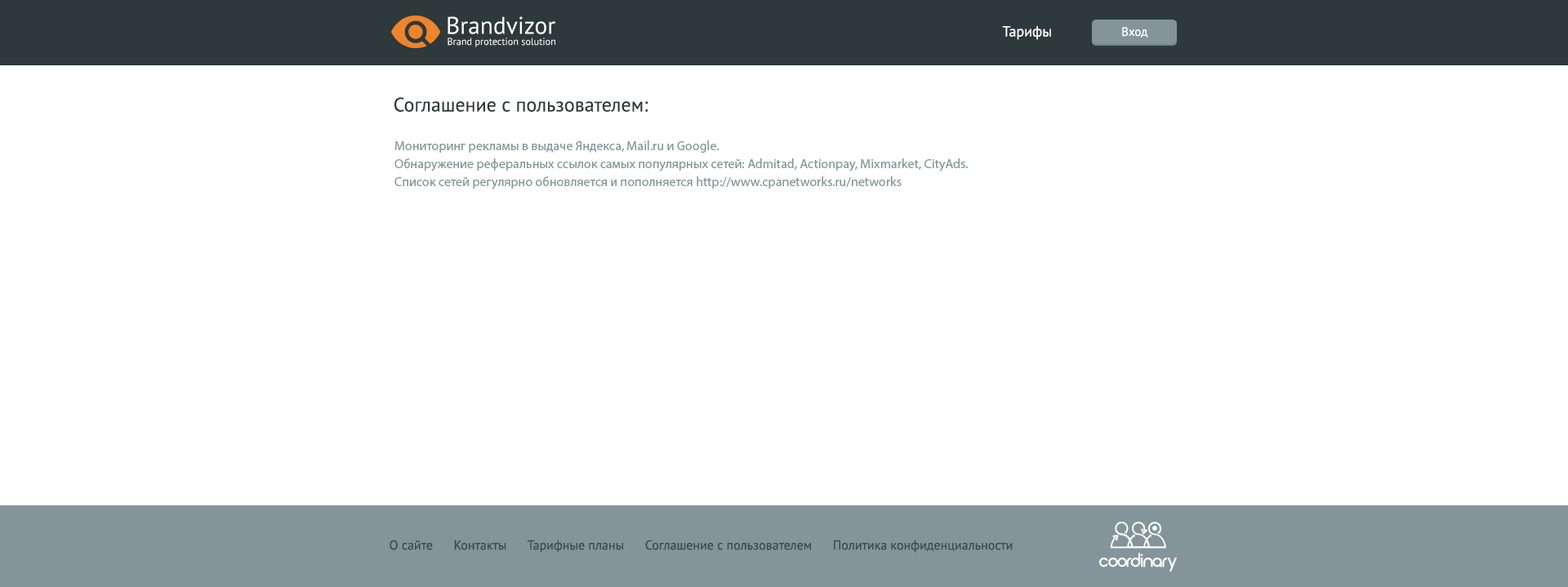
<style>
.page{position:relative;width:1568px;height:587px;background:#ffffff}
.page>*{position:absolute;margin:0}
.t1{font:14.7px "PTSans-Regular";color:#ffffff}
.t2{font:12.2px "PTSans-Regular";color:#ffffff}
.t3{font:19.6px "PTSans-Regular";color:#2d393b}
.t4{font:13.1px/18px "MyriadPro-Regular";color:#83959a}
.t5{font:13.1px "PTSans-Regular";color:#3a494b}
</style>
<div class="page">
<p class="t1" style="left:1002px;top:26px;width:49px;height:14px">Тарифы</p>
<p class="t2" style="left:1122px;top:27px;width:26px;height:11px">Вход</p>
<p class="t3" style="left:394px;top:97px;width:254px;height:15px">Соглашение с пользователем:</p>
<p class="t4" style="left:394px;top:140px;width:575px;height:49px">Мониторинг рекламы в выдаче Яндекса, Mail.ru и Google.<br>Обнаружение реферальных ссылок самых популярных сетей: Admitad, Actionpay, Mixmarket, CityAds.<br>Список сетей регулярно обновляется и пополняется http://www.cpanetworks.ru/networks</p>
<p class="t5" style="left:390px;top:540px;width:623px;height:13px">О сайте      Контакты      Тарифные планы      Соглашение с пользователем      Политика конфиденциальности</p>
</div>
